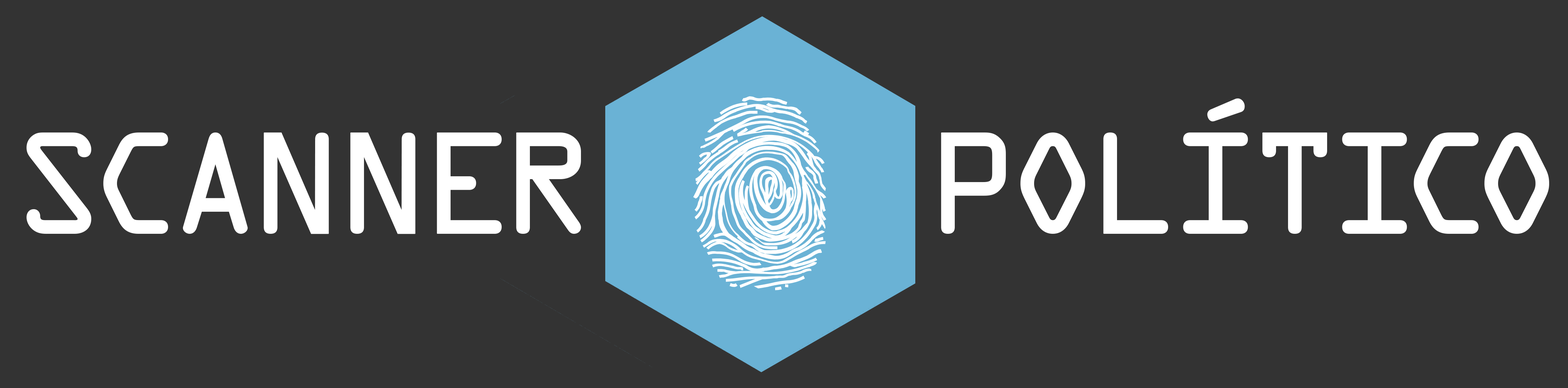
<style>
.page{position:relative;width:1568px;height:388px;background:#333333}
.page>*{position:absolute;margin:0}
.t1{font:129.6px "OCRAStd";letter-spacing:-0.1em;color:#ffffff;font-weight:bold}
</style>
<div class="page">
<p class="t1" style="left:26px;top:133px;width:555px;height:101px">SCANNER</p>
<p class="t1" style="left:941px;top:133px;width:608px;height:101px">POLITICO</p>
</div>
